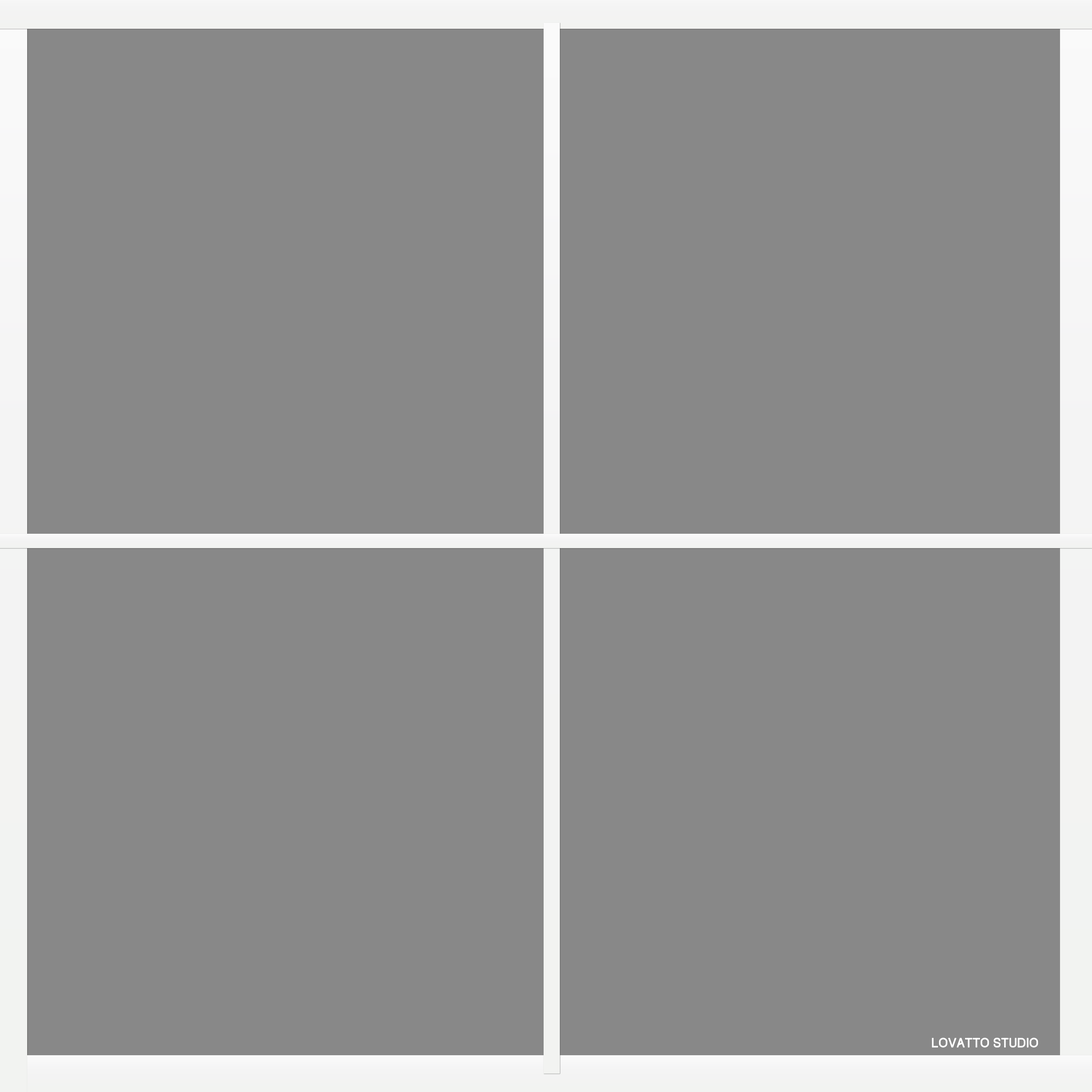
<style>
.page{position:relative;width:1092px;height:1092px;background:#888888}
.page>*{position:absolute;margin:0}
.t1{font:12px "Track";color:#ffffff}
</style>
<div class="page">
<p class="t1" style="left:932px;top:1038px;width:106px;height:9px">LOVATTO STUDIO</p>
</div>
